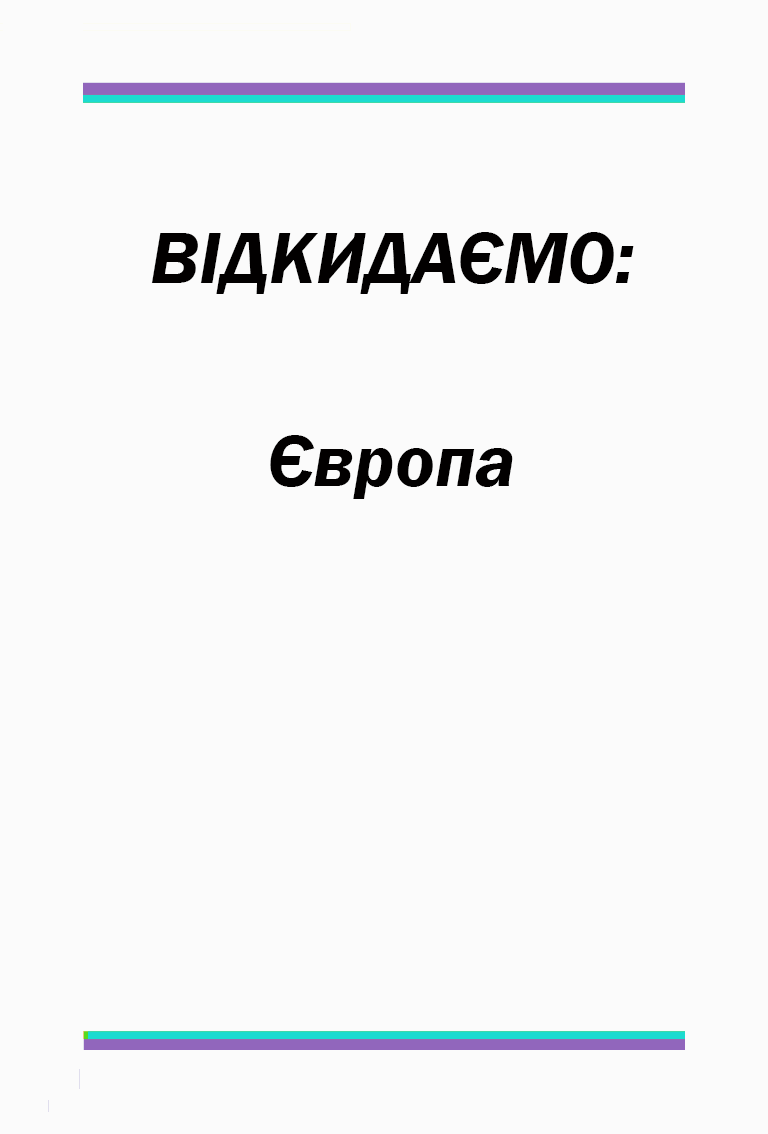
<style>
.page{position:relative;width:768px;height:1134px;background:#fbfbfb}
.page>*{position:absolute;margin:0}
.t1{font:75px "FranklinGothic-DemiItalic";color:#020000}
</style>
<div class="page">
<p class="t1" style="left:151px;top:232px;width:483px;height:62px">ВІДКИДАЄМО:</p>
<p class="t1" style="left:270px;top:435px;width:243px;height:64px">Європа</p>
</div>
